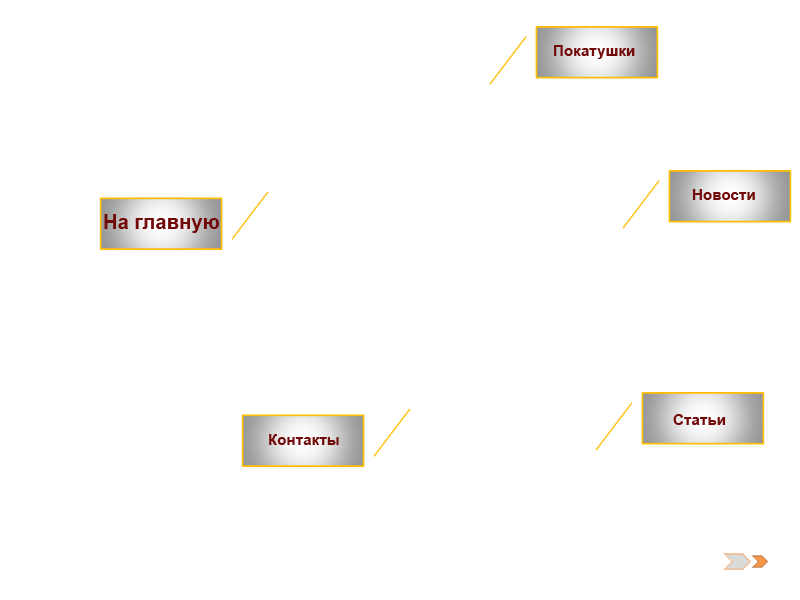
<style>
.page{position:relative;width:800px;height:600px;background:#ffffff}
.page>*{position:absolute;margin:0}
.t1{font:15.2px "Arial-BoldMT";color:#720909}
.t2{font:20.3px "Arial-BoldMT";color:#720909}
</style>
<div class="page">
<p class="t1" style="left:554px;top:45px;width:81px;height:14px">Покатушки</p>
<p class="t1" style="left:692px;top:189px;width:63px;height:11px">Новости</p>
<p class="t2" style="left:104px;top:214px;width:115px;height:19px">На главную</p>
<p class="t1" style="left:673px;top:414px;width:53px;height:11px">Статьи</p>
<p class="t1" style="left:269px;top:434px;width:70px;height:11px">Контакты</p>
</div>
